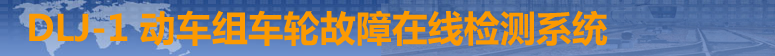
<style>
.page{position:relative;width:775px;height:56px}
.page>*{position:absolute;margin:0}
.t1{font:36px "MicrosoftYaHei-Bold";color:#fc9a01}
</style>
<div class="page">
<p class="t1" style="left:29px;top:10px;width:579px;height:36px">DLJ-1 动车组车轮故障在线检测系统</p>
</div>
